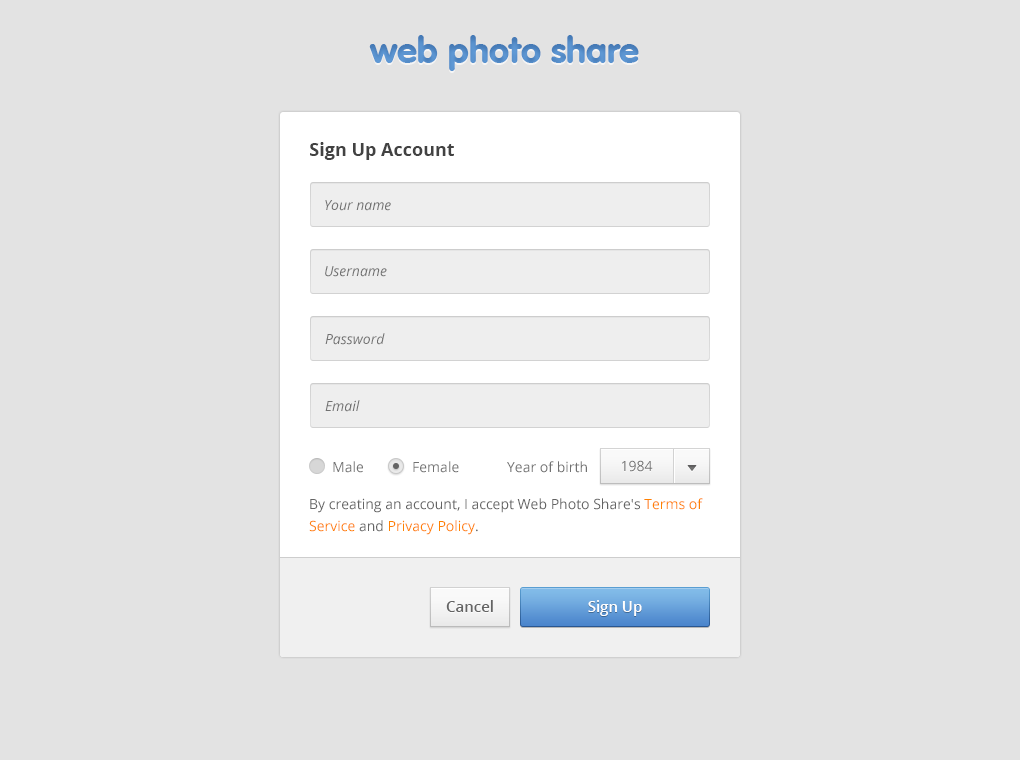
<style>
.page{position:relative;width:1020px;height:760px;background:#e3e3e3}
.page>*{position:absolute;margin:0}
.t1{font:36px "VAGRounded-Black";color:#619bd7}
.t2{font:18px "OpenSans-Bold";color:#424242}
.t3{font:14px "OpenSans-Italic";color:#717171}
.t4{font:14px "OpenSans";color:#717171}
.t5{font:14px/22px "OpenSans";color:#646464}
.t6{font:14px/22px "OpenSans";color:#ff8100}
.t7{font:15px "OpenSans-Semibold";color:#646464}
.t8{font:15px "OpenSans-Semibold";color:#ffffff}
</style>
<div class="page">
<p class="t1" style="left:369px;top:35px;width:270px;height:36px">web photo share</p>
<p class="t2" style="left:310px;top:142px;width:144px;height:18px">Sign Up Account</p>
<p class="t3" style="left:325px;top:200px;width:66px;height:11px">Your name</p>
<p class="t3" style="left:325px;top:266px;width:62px;height:11px">Username</p>
<p class="t3" style="left:325px;top:333px;width:60px;height:12px">Password</p>
<p class="t3" style="left:325px;top:400px;width:35px;height:12px">Email</p>
<p class="t4" style="left:333px;top:461px;width:30px;height:12px">Male</p>
<p class="t4" style="left:413px;top:461px;width:46px;height:12px">Female</p>
<p class="t4" style="left:507px;top:461px;width:80px;height:12px">Year of birth</p>
<p class="t4" style="left:622px;top:460px;width:31px;height:12px">1984</p>
<p class="t5" style="left:309px;top:498px;width:394px;height:37px">By creating an account, I accept Web Photo Share's <span class="t6">Terms of Service</span> and <span class="t6">Privacy Policy</span>.</p>
<p class="t7" style="left:446px;top:600px;width:47px;height:12px">Cancel</p>
<p class="t8" style="left:588px;top:600px;width:54px;height:16px">Sign Up</p>
</div>
